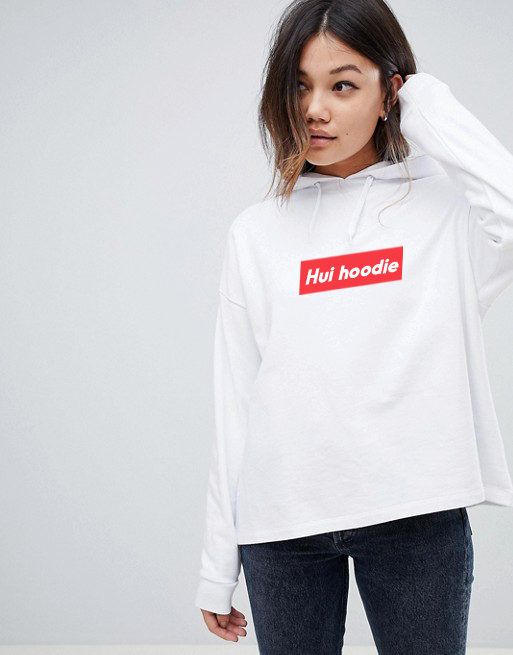
<style>
.page{position:relative;width:513px;height:655px}
.page>*{position:absolute;margin:0}
.t1{font:20px "Odudo-Bold";letter-spacing:-0.01em;color:#ffffff;font-style:italic}
</style>
<div class="page">
<p class="t1" style="left:305px;top:258px;width:94px;height:27px;rotate:-8deg">Hui hoodie</p>
</div>
